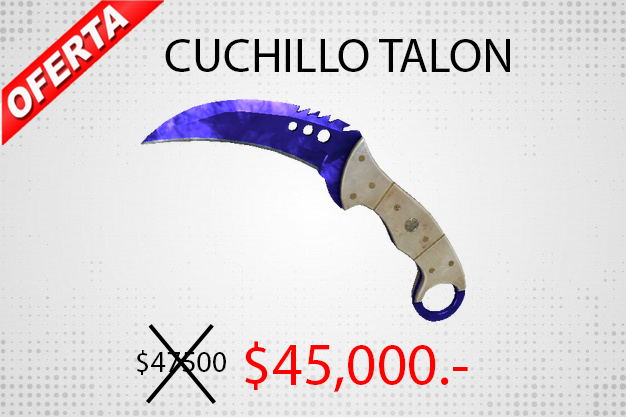
<style>
.page{position:relative;width:626px;height:417px}
.page>*{position:absolute;margin:0}
.t1{font:48px "MyriadPro-Regular";color:#000000}
.t2{font:60px "MyriadPro-Regular";color:#ff0000}
.t3{font:30px "MyriadPro-Regular";color:#000000}
</style>
<div class="page">
<p class="t1" style="left:165px;top:39px;width:345px;height:33px">CUCHILLO TALON</p>
<p class="t2" style="left:245px;top:341px;width:223px;height:51px">$45,000.-</p>
<p class="t3" style="left:137px;top:350px;width:89px;height:25px">$47500</p>
</div>
